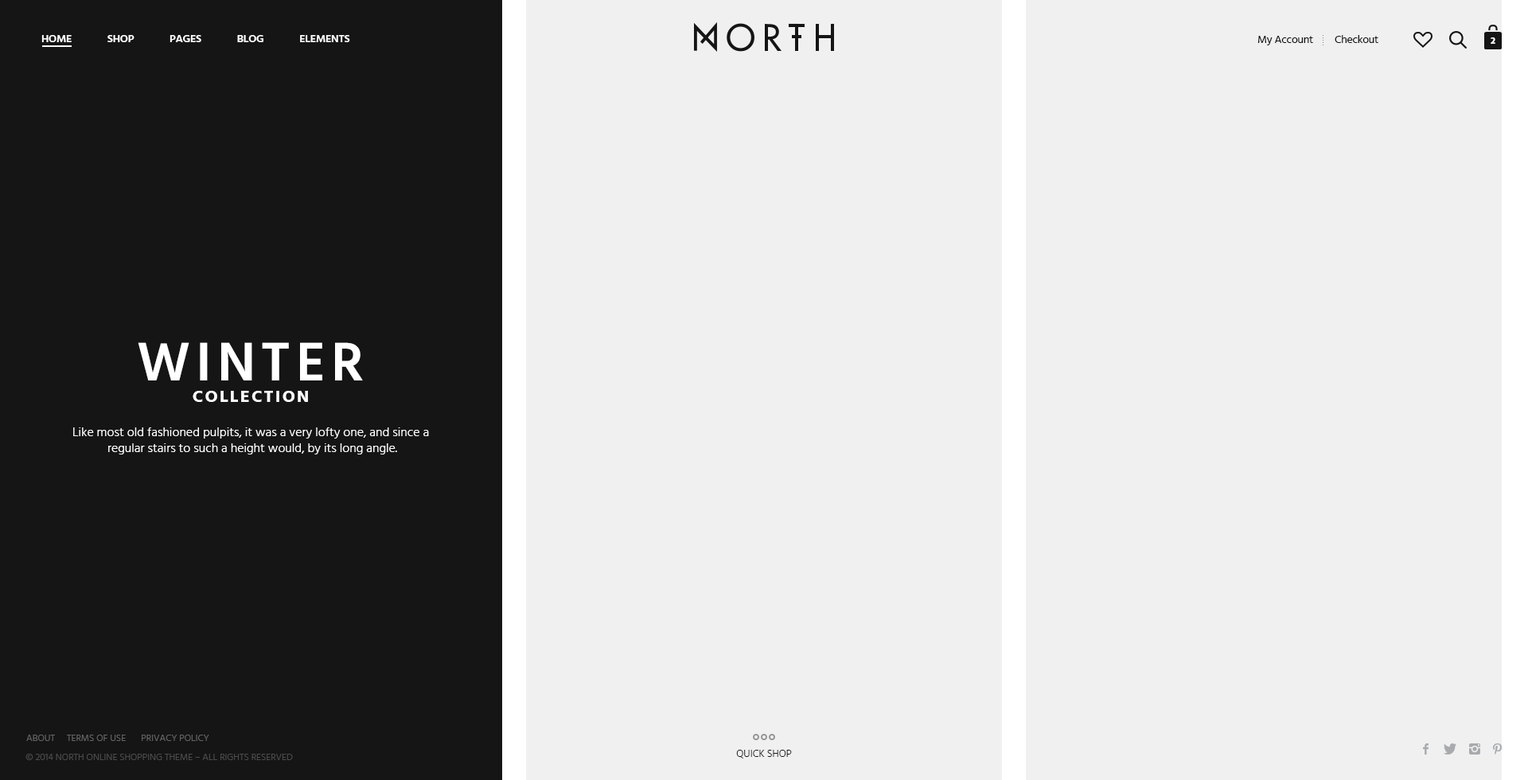
<style>
.page{position:relative;width:1528px;height:780px;background:#f0f0f0}
.page>*{position:absolute;margin:0}
.t1{font:11.1px "Hind-Semibold";letter-spacing:-0.02em;color:#ffffff;text-transform:uppercase}
.t2{font:11.1px "Hind-Regular";letter-spacing:-0.02em;color:#141414}
.t3{font:8.7px "ArialMT";color:#898989}
.t4{font:9.6px "Hind-Bold";letter-spacing:-0.02em;color:#ffffff;text-transform:uppercase}
.t5{font:55.7px "Hind-Semibold";letter-spacing:0.1em;color:#ffffff}
.t6{font:17.5px "Hind-Bold";letter-spacing:0.1em;color:#ffffff}
.t7{font:12.7px/15.9px "Hind-Light";color:#ffffff}
.t8{font:9.6px "Hind-Light";color:#666666;text-transform:uppercase}
.t9{font:10.3px "Hind-Light";color:#151515;text-transform:uppercase}
.t10{font:9.6px "Hind-Light";color:#4c4c4c;text-transform:uppercase}
</style>
<div class="page">
<p class="t1" style="left:41px;top:35px;width:309px;height:7px">HOME              SHOP              PAGES              BLOG              ELEMENTS</p>
<p class="t2" style="left:1258px;top:36px;width:56px;height:9px">My Account</p>
<p class="t3" style="left:1323px;top:35px;width:1px;height:10px;rotate:-90deg">.....</p>
<p class="t2" style="left:1335px;top:35px;width:44px;height:8px">Checkout</p>
<p class="t4" style="left:1491px;top:37px;width:5px;height:7px">2</p>
<p class="t5" style="left:138px;top:342px;width:225px;height:39px">WINTER</p>
<p class="t6" style="left:193px;top:391px;width:115px;height:11px">COLLECTION</p>
<p class="t7" style="left:73px;top:427px;width:356px;height:28px;text-align:center">Like most old fashioned pulpits, it was a very lofty one, and since a <br>regular stairs to such a height would, by its long angle.</p>
<p class="t8" style="left:26px;top:735px;width:29px;height:6px">ABOUT</p>
<p class="t8" style="left:67px;top:735px;width:59px;height:6px">TERMS OF USE</p>
<p class="t8" style="left:142px;top:735px;width:67px;height:6px">PRIVACY POLICY</p>
<p class="t9" style="left:736px;top:750px;width:56px;height:9px">QUICK SHOP</p>
<p class="t10" style="left:25px;top:754px;width:268px;height:6px">© 2014 NORTH ONLINE SHOPPING THEME – All Rights Reserved</p>
</div>
